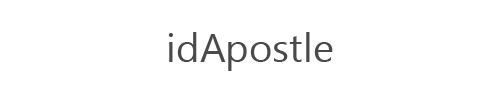
<style>
.page{position:relative;width:500px;height:100px;background:#ffffff}
.page>*{position:absolute;margin:0}
.t1{font:40px "Gadugi";color:#4a4a4a}
</style>
<div class="page">
<p class="t1" style="left:168px;top:32px;width:165px;height:39px">idApostle</p>
</div>
